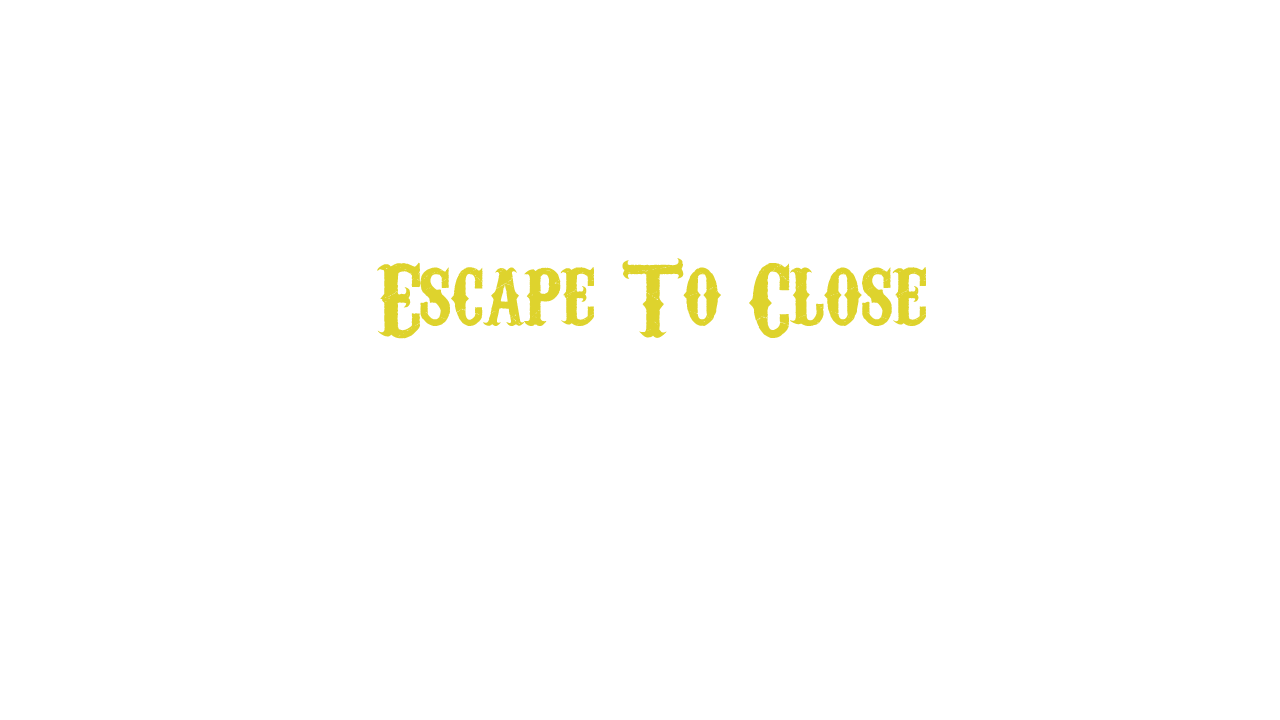
<style>
.page{position:relative;width:1280px;height:720px;background:#ffffff}
.page>*{position:absolute;margin:0}
.t1{font:100px "CarnivaleeFreakshow";color:#ded32d}
</style>
<div class="page">
<p class="t1" style="left:377px;top:258px;width:549px;height:81px">Escape To Close</p>
</div>
